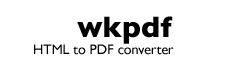
<style>
.page{position:relative;width:230px;height:70px;background:#ffffff}
.page>*{position:absolute;margin:0}
.t1{font:30px "GillSans-Bold";color:#000000}
.t2{font:14px "GillSans";color:#000000}
</style>
<div class="page">
<p class="t1" style="left:77px;top:16px;width:96px;height:28px">wkpdf</p>
<p class="t2" style="left:34px;top:44px;width:140px;height:11px">HTML to PDF converter</p>
</div>
